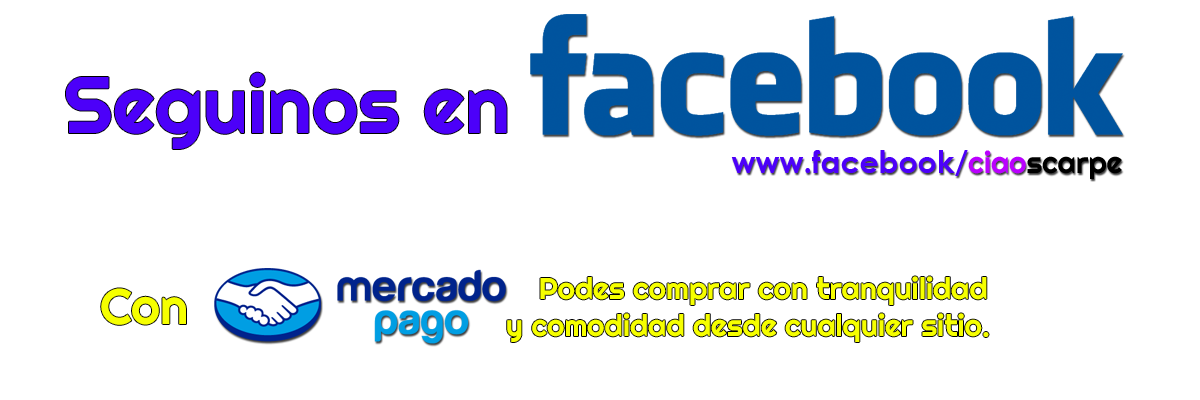
<style>
.page{position:relative;width:1200px;height:400px;background:#ffffff}
.page>*{position:absolute;margin:0}
.t1{font:80px "Righteous-Regular";color:#4c00f9}
.t2{font:30px "CenturyGothic-Bold";color:#4c00f9}
.t3{font:30px "Righteous-Regular";color:#ba00ff}
.t4{font:30px "Righteous-Regular";color:#000000}
.t5{font:30px "Righteous-Regular";color:#f6ff00}
.t6{font:50px "Righteous-Regular";color:#f6ff00}
</style>
<div class="page">
<p class="t1" style="left:66px;top:72px;width:441px;height:77px">Seguinos en</p>
<p class="t2" style="left:731px;top:150px;width:391px;height:29px">www.facebook/<span class="t3">ciao</span><span class="t4">scarpe</span></p>
<p class="t5" style="left:540px;top:276px;width:447px;height:29px">Podes comprar con tranquilidad</p>
<p class="t6" style="left:101px;top:288px;width:85px;height:37px">Con</p>
<p class="t5" style="left:507px;top:313px;width:482px;height:29px">y comodidad desde cualquier sitio.</p>
</div>
